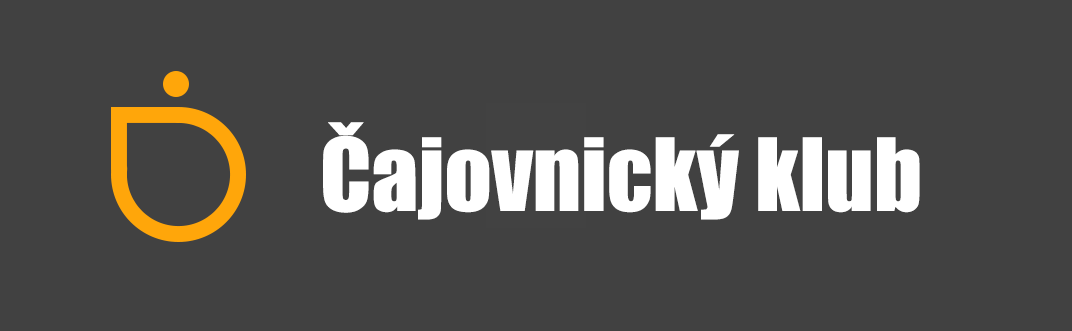
<style>
.page{position:relative;width:1072px;height:331px;background:#414141}
.page>*{position:absolute;margin:0}
.t1{font:93px "Impact";color:#ffffff}
</style>
<div class="page">
<p class="t1" style="left:323px;top:122px;width:597px;height:98px">Čajovnický klub</p>
</div>
